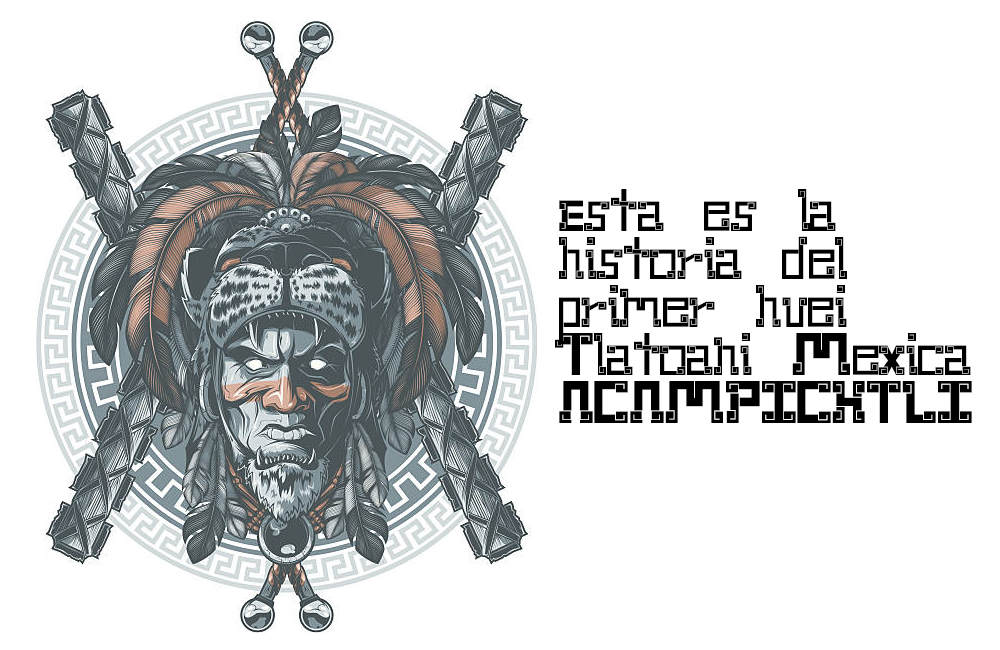
<style>
.page{position:relative;width:1000px;height:650px;background:#ffffff}
.page>*{position:absolute;margin:0}
.t1{font:40px "New-Wave-Aztec-Regular";color:#000000}
.t2{font:29px "New-Wave-Aztec-Regular";color:#000000}
</style>
<div class="page">
<p class="t1" style="left:555px;top:189px;width:417px;height:234px"><span class="t2">E</span>sta es la historia del primer huei Tlatoani Mexica<br>ACAMPICHTLI</p>
</div>
